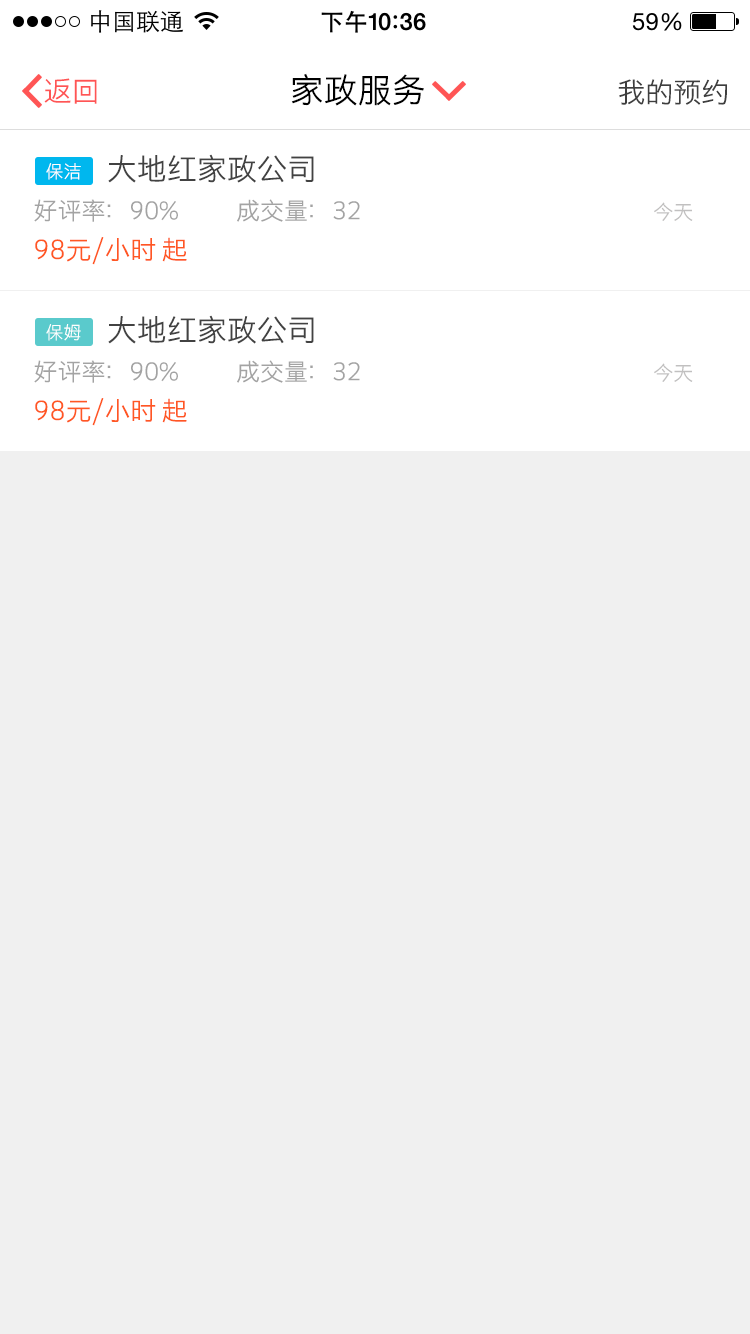
<style>
.page{position:relative;width:750px;height:1334px;background:#f0f0f0}
.page>*{position:absolute;margin:0}
.t1{font:28px "STHeitiSC-Light";color:#ff5555}
.t2{font:34px "STHeitiSC-Light";color:#000000}
.t3{font:28px "STHeitiSC-Light";color:#3e3e3e}
.t4{font:30px "STHeitiSC-Light";color:#424242}
.t5{font:18px "STHeitiSC-Light";color:#ffffff}
.t6{font:24px "STHeitiSC-Light";color:#a3a3a3}
.t7{font:20px "STHeitiSC-Light";color:#c1c0c0}
.t8{font:26px "STHeitiSC-Light";color:#ff5723}
</style>
<div class="page">
<p class="t1" style="left:44px;top:78px;width:53px;height:26px">返回</p>
<p class="t2" style="left:291px;top:73px;width:133px;height:33px">家政服务</p>
<p class="t3" style="left:618px;top:79px;width:109px;height:26px">我的预约</p>
<p class="t4" style="left:108px;top:154px;width:206px;height:29px">大地红家政公司</p>
<p class="t5" style="left:46px;top:163px;width:35px;height:17px">保洁</p>
<p class="t6" style="left:34px;top:199px;width:326px;height:23px">好评率：90%            成交量：32</p>
<p class="t7" style="left:654px;top:202px;width:39px;height:19px">今天</p>
<p class="t8" style="left:35px;top:237px;width:152px;height:28px">98元/小时 起</p>
<p class="t4" style="left:108px;top:315px;width:206px;height:29px">大地红家政公司</p>
<p class="t5" style="left:46px;top:324px;width:35px;height:17px">保姆</p>
<p class="t6" style="left:34px;top:360px;width:326px;height:23px">好评率：90%            成交量：32</p>
<p class="t7" style="left:654px;top:363px;width:39px;height:19px">今天</p>
<p class="t8" style="left:35px;top:398px;width:152px;height:28px">98元/小时 起</p>
</div>
